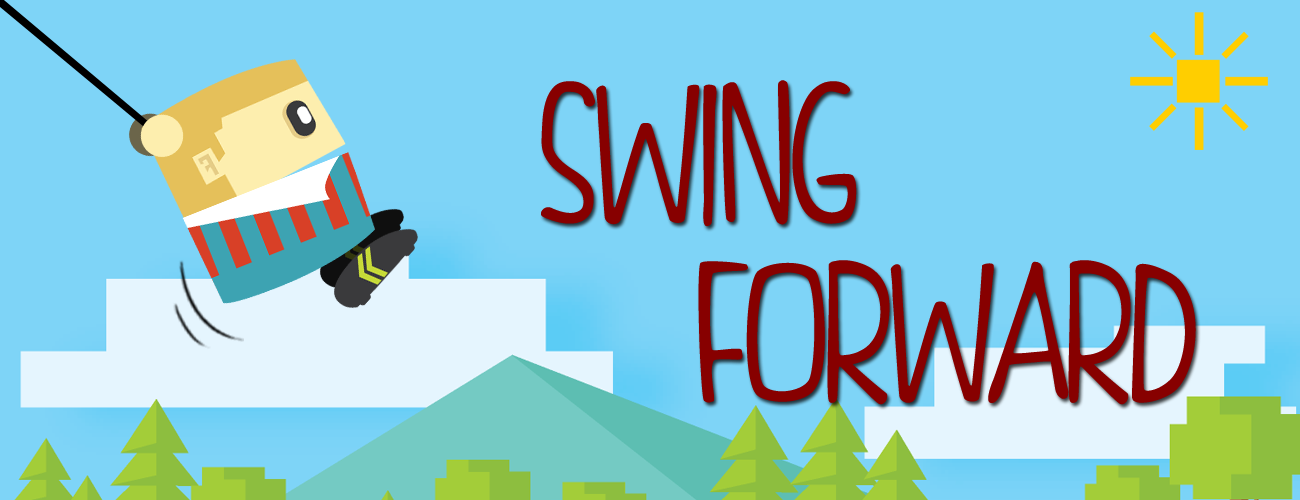
<style>
.page{position:relative;width:1300px;height:500px;background:#7ed4f7}
.page>*{position:absolute;margin:0}
.t1{font:209.3px "FISHfingers";letter-spacing:-0.025em;color:#870000}
</style>
<div class="page">
<p class="t1" style="left:541px;top:80px;width:316px;height:147px">SWING</p>
<p class="t1" style="left:698px;top:260px;width:498px;height:145px">FORWARD</p>
</div>
